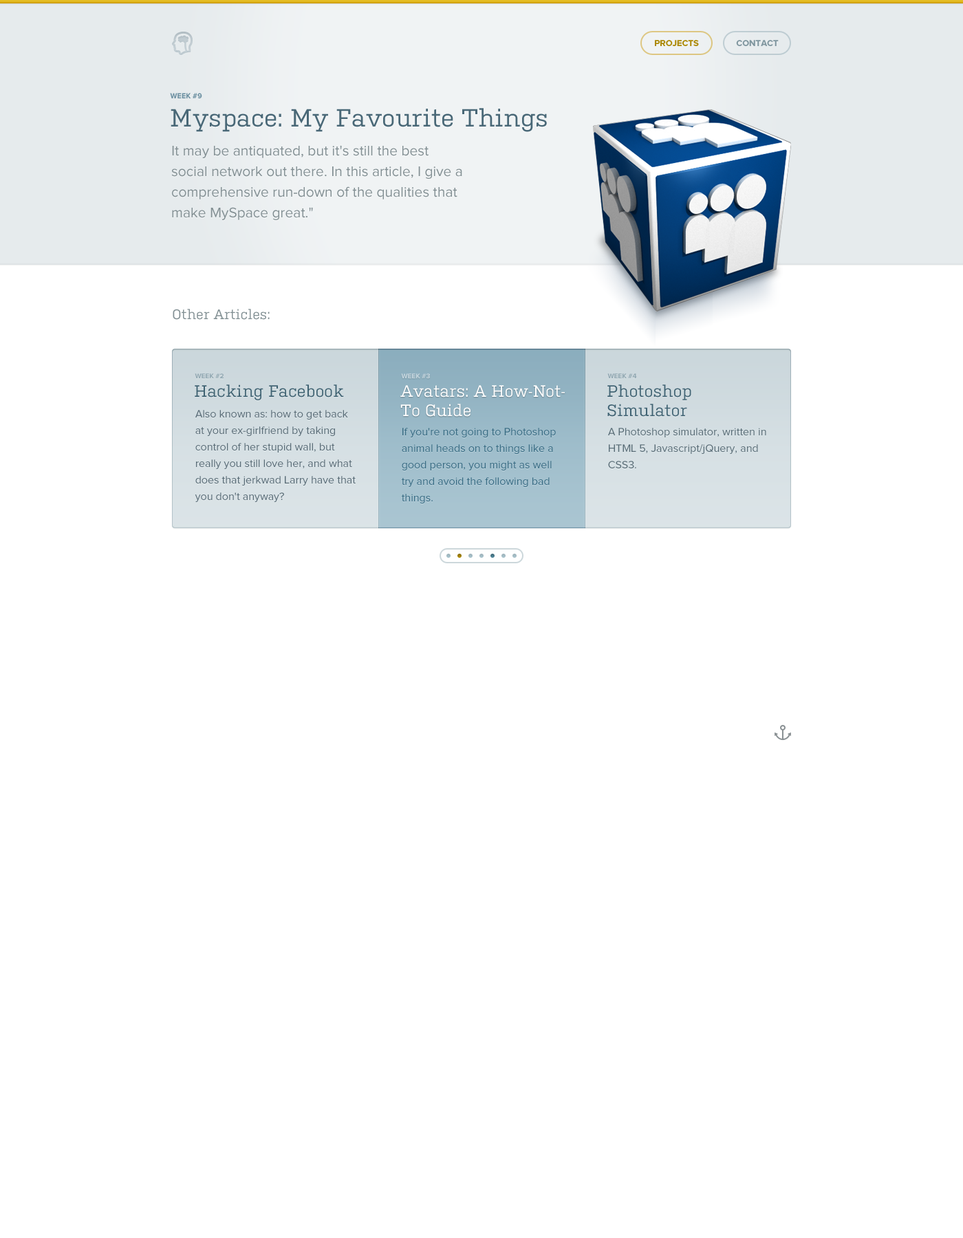
<style>
.page{position:relative;width:963px;height:1238px;background:#ffffff}
.page>*{position:absolute;margin:0}
.t1{font:8.9px "ProximaNova-Bold";color:#ac8800;text-transform:uppercase}
.t2{font:8.9px "ProximaNova-Bold";color:#7d949d;text-transform:uppercase}
.t3{font:7.6px "ProximaNova-Bold";color:#668b9d;text-transform:uppercase}
.t4{font:24.8px "Kulturista";color:#496877}
.t5{font:14.4px/20.6px "ProximaNova-Regular";color:#818e92}
.t6{font:13.8px "Kulturista";color:#808e92}
.t7{font:6.9px "ProximaNova-Bold";color:#90a7b1;text-transform:uppercase}
.t8{font:6.9px "ProximaNova-Bold";color:#c7d8e0;text-transform:uppercase}
.t9{font:16.5px "Kulturista";color:#406373}
.t10{font:16.5px/19.3px "Kulturista";color:#ffffff}
.t11{font:16.5px/19.3px "Kulturista";color:#406373}
.t12{font:11px/16.5px "ProximaNova-Regular";color:#586c76}
.t13{font:11px/16.5px "ProximaNova-Regular";color:#376b83}
</style>
<div class="page">
<p class="t1" style="left:655px;top:40px;width:44px;height:6px">projects</p>
<p class="t2" style="left:736px;top:40px;width:43px;height:6px">contact</p>
<p class="t3" style="left:170px;top:93px;width:32px;height:5px">Week #9</p>
<p class="t4" style="left:171px;top:108px;width:376px;height:24px">Myspace: My Favourite Things</p>
<p class="t5" style="left:171px;top:145px;width:291px;height:75px">It may be antiquated, but it's still the best social network out there. In this article, I give a comprehensive run-down of the qualities that make MySpace great."</p>
<p class="t6" style="left:173px;top:309px;width:97px;height:11px">Other Articles:</p>
<p class="t7" style="left:195px;top:374px;width:29px;height:4px">Week #2</p>
<p class="t8" style="left:401px;top:374px;width:29px;height:4px">Week #3</p>
<p class="t7" style="left:607px;top:374px;width:30px;height:4px">Week #4</p>
<p class="t9" style="left:195px;top:385px;width:149px;height:15px">Hacking Facebook</p>
<p class="t10" style="left:400px;top:385px;width:165px;height:32px">Avatars: A How-Not-<br>To Guide</p>
<p class="t11" style="left:607px;top:385px;width:84px;height:32px">Photoshop<br>Simulator</p>
<p class="t12" style="left:195px;top:410px;width:161px;height:92px">Also known as: how to get back at your ex-girlfriend by taking control of her stupid wall, but really you still love her, and what does that jerkwad Larry have that you don't anyway?</p>
<p class="t13" style="left:402px;top:428px;width:154px;height:76px">If you're not going to Photoshop animal heads on to things like a good person, you might as well try and avoid the following bad things.</p>
<p class="t12" style="left:608px;top:428px;width:158px;height:40px">A Photoshop simulator, written in HTML 5, Javascript/jQuery, and CSS3.</p>
</div>
